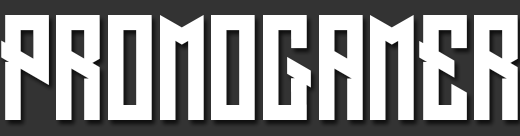
<style>
.page{position:relative;width:520px;height:136px;background:#ffffff}
.page>*{position:absolute;margin:0}
.t1{font:135px "LongShot";color:#ffffff}
</style>
<div class="page">
<p class="t1" style="left:1px;top:15px;width:517px;height:105px">PROMOGAMER</p>
</div>
